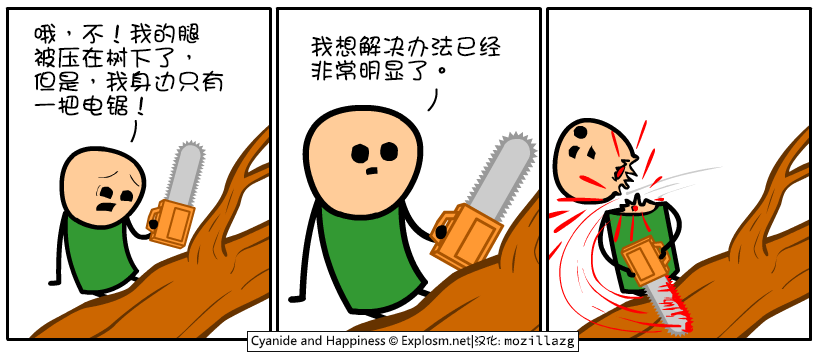
<style>
.page{position:relative;width:820px;height:355px;background:#ffffff}
.page>*{position:absolute;margin:0}
.t1{font:24px/24px "DFGirl";color:#000000}
</style>
<div class="page">
<p class="t1" style="left:34px;top:22px;width:190px;height:94px">哦，不！我的腿<br>被压在树下了，<br>但是，我身边只有<br>一把电锯！</p>
<p class="t1" style="left:311px;top:35px;width:190px;height:46px">我想解决办法已经<br>非常明显了。</p>
</div>
